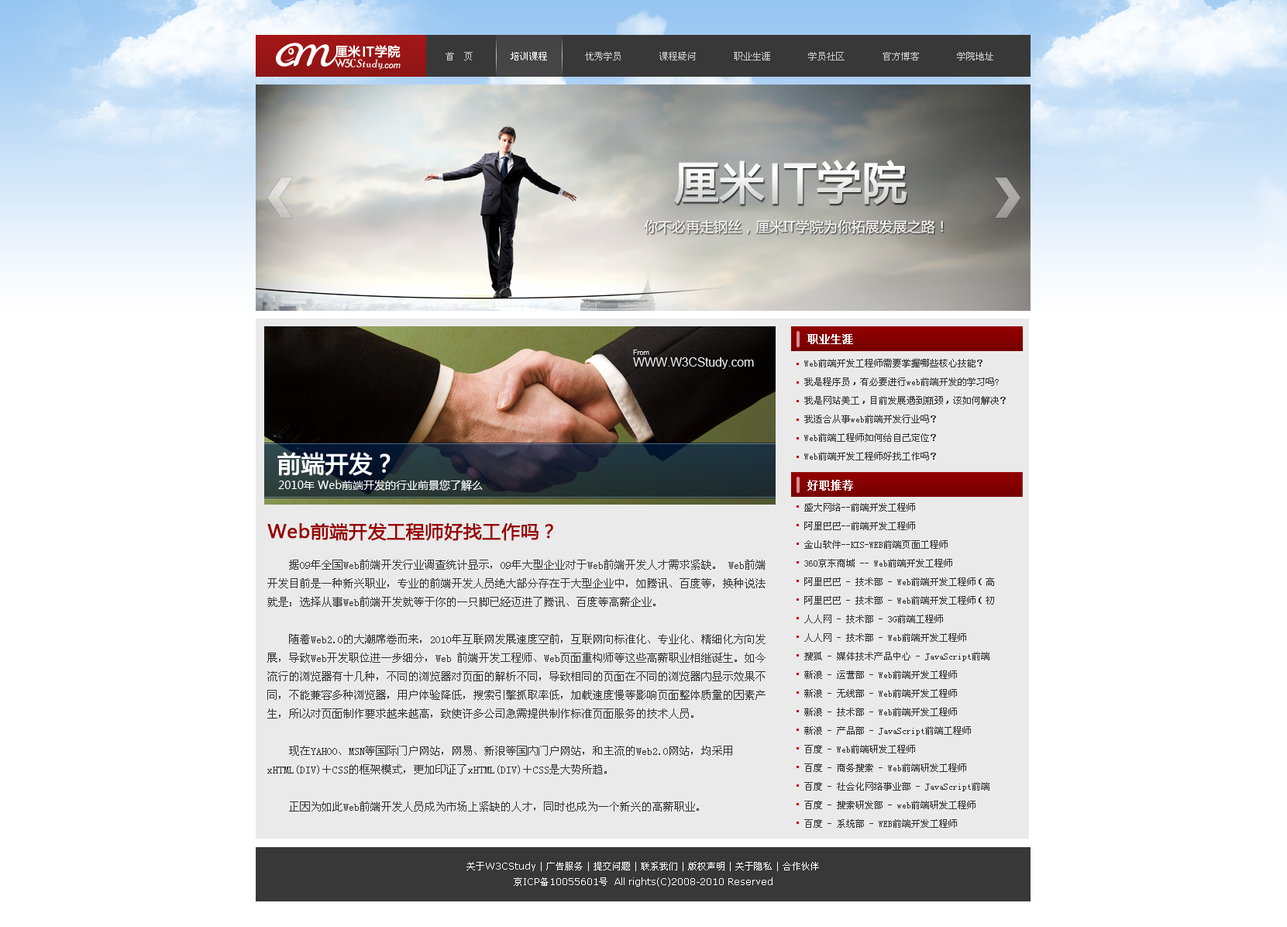
<style>
.page{position:relative;width:1287px;height:927px;background:#ffffff}
.page>*{position:absolute;margin:0}
.t1{font:9.3px "SimSun";color:#cccccc}
.t2{font:9.3px "SimSun";color:#ffffff}
.t3{font:10.8px "SimSun";color:#ffffff;font-weight:bold}
.t4{font:9.3px/18.6px "SimSun";color:#333333}
.t5{font:18.6px "MicrosoftYaHei";color:#990000;font-weight:bold}
.t6{font:10.8px/18.6px "SimSun";color:#333333}
.t7{font:9.3px/15.5px "Verdana";color:#ffffff}
.t8{font:9.3px/15.5px "SimSun";color:#ffffff}
</style>
<div class="page">
<p class="t1" style="left:445px;top:52px;width:548px;height:8px">首  页        <span class="t2">培训课程</span>        优秀学员        课程疑问        职业生涯        学员社区        官方博客        学院地址</p>
<p class="t3" style="left:807px;top:334px;width:46px;height:10px">职业生涯</p>
<p class="t4" style="left:804px;top:359px;width:202px;height:101px">Web前端开发工程师需要掌握哪些核心技能？<br>我是程序员，有必要进行web前端开发的学习吗?<br>我是网站美工，目前发展遇到瓶颈，该如何解决？<br>我适合从事web前端开发行业吗？<br>Web前端工程师如何给自己定位？<br>Web前端开发工程师好找工作吗？</p>
<p class="t3" style="left:807px;top:480px;width:46px;height:10px">好职推荐</p>
<p class="t4" style="left:804px;top:503px;width:190px;height:324px">盛大网络--前端开发工程师<br>阿里巴巴--前端开发工程师<br>金山软件--KIS-WEB前端页面工程师<br>360京东商城 -- Web前端开发工程师<br>阿里巴巴 - 技术部 - Web前端开发工程师（高<br>阿里巴巴 - 技术部 - Web前端开发工程师（初<br>人人网 - 技术部 - 3G前端工程师<br>人人网 - 技术部 - Web前端开发工程师<br>搜狐 - 媒体技术产品中心 - JavaScript前端<br>新浪 - 运营部 - Web前端开发工程师<br>新浪 - 无线部 - Web前端开发工程师<br>新浪 - 技术部 - Web前端开发工程师<br>新浪 - 产品部 - JavaScript前端工程师<br>百度 - Web前端研发工程师<br>百度 - 商务搜索 - Web前端研发工程师<br>百度 - 社会化网络事业部 - JavaScript前端<br>百度 - 搜索研发部 - web前端研发工程师<br>百度 - 系统部 - WEB前端开发工程师</p>
<p class="t5" style="left:267px;top:523px;width:286px;height:18px">Web前端开发工程师好找工作吗？</p>
<p class="t6" style="left:267px;top:559px;width:498px;height:252px">据09年全国Web前端开发行业调查统计显示，09年大型企业对于Web前端开发人才需求紧缺。 Web前端开发目前是一种新兴职业，专业的前端开发人员绝大部分存在于大型企业中，如腾讯、百度等，换种说法就是：选择从事Web前端开发就等于你的一只脚已经迈进了腾讯、百度等高薪企业。<br><br>    随着Web2.0的大潮席卷而来，2010年互联网发展速度空前，互联网向标准化、专业化、精细化方向发展，导致Web开发职位进一步细分，Web 前端开发工程师、Web页面重构师等这些高薪职业相继诞生。如今流行的浏览器有十几种，不同的浏览器对页面的解析不同，导致相同的页面在不同的浏览器内显示效果不同，不能兼容多种浏览器，用户体验降低，搜索引擎抓取率低，加载速度慢等影响页面整体质量的因素产生，所以对页面制作要求越来越高，致使许多公司急需提供制作标准页面服务的技术人员。<br><br>    现在YAHOO、MSN等国际门户网站，网易、新浪等国内门户网站，和主流的Web2.0网站，均采用xHTML(DIV)＋CSS的框架模式，更加印证了xHTML(DIV)＋CSS是大势所趋。<br><br>    正因为如此Web前端开发人员成为市场上紧缺的人才，同时也成为一个新兴的高薪职业。</p>
<p class="t7" style="left:466px;top:862px;width:353px;height:24px;text-align:center"><span class="t8">关于</span>W3CStudy | <span class="t8">广告服务</span> | <span class="t8">提交问题</span> | <span class="t8">联系我们</span> | <span class="t8">版权声明</span> | <span class="t8">关于隐私</span> | <span class="t8">合作伙伴<br>京</span>ICP<span class="t8">备</span>10055601<span class="t8">号</span>  All rights(C)2008-2010 Reserved</p>
</div>
